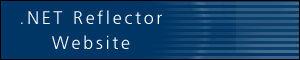
<style>
.page{position:relative;width:300px;height:60px;background:#003665}
.page>*{position:absolute;margin:0}
.t1{font:18px/25px "ImagoLt";letter-spacing:0.15em;color:#ffffff}
</style>
<div class="page">
<p class="t1" style="left:21px;top:10px;width:141px;height:39px;text-align:center">.NET Reflector<br>Website</p>
</div>
